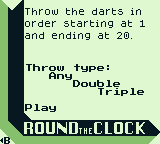
<style>
.page{position:relative;width:160px;height:144px;background:#e0f8cf}
.page>*{position:absolute;margin:0}
.t1{font:8px/12px "Dogica_Pixel";color:#071821}
.t2{font:8px/8px "PressStart2P-Regular";color:#071821}
.t3{font:16px "Krungthep";color:#e0f8cf}
.t4{font:8px "Krungthep";color:#e0f8cf}
.t5{font:8px "PressStart2P-Regular";color:#071821;scale:0.87 1}
</style>
<div class="page">
<p class="t1" style="left:25px;top:8px;width:120px;height:32px">Throw the darts in order starting at 1 and ending at 20.</p>
<p class="t2" style="left:25px;top:64px;width:119px;height:48px">Throw type:<br>   Any<br>      Double<br>         Triple <br><br>Play</p>
<p class="t3" style="left:24px;top:122px;width:121px;height:12px">ROUND<span class="t4">THE</span>CLOCK</p>
<p class="t5" style="left:4px;top:137px;width:6px;height:7px">B</p>
</div>
